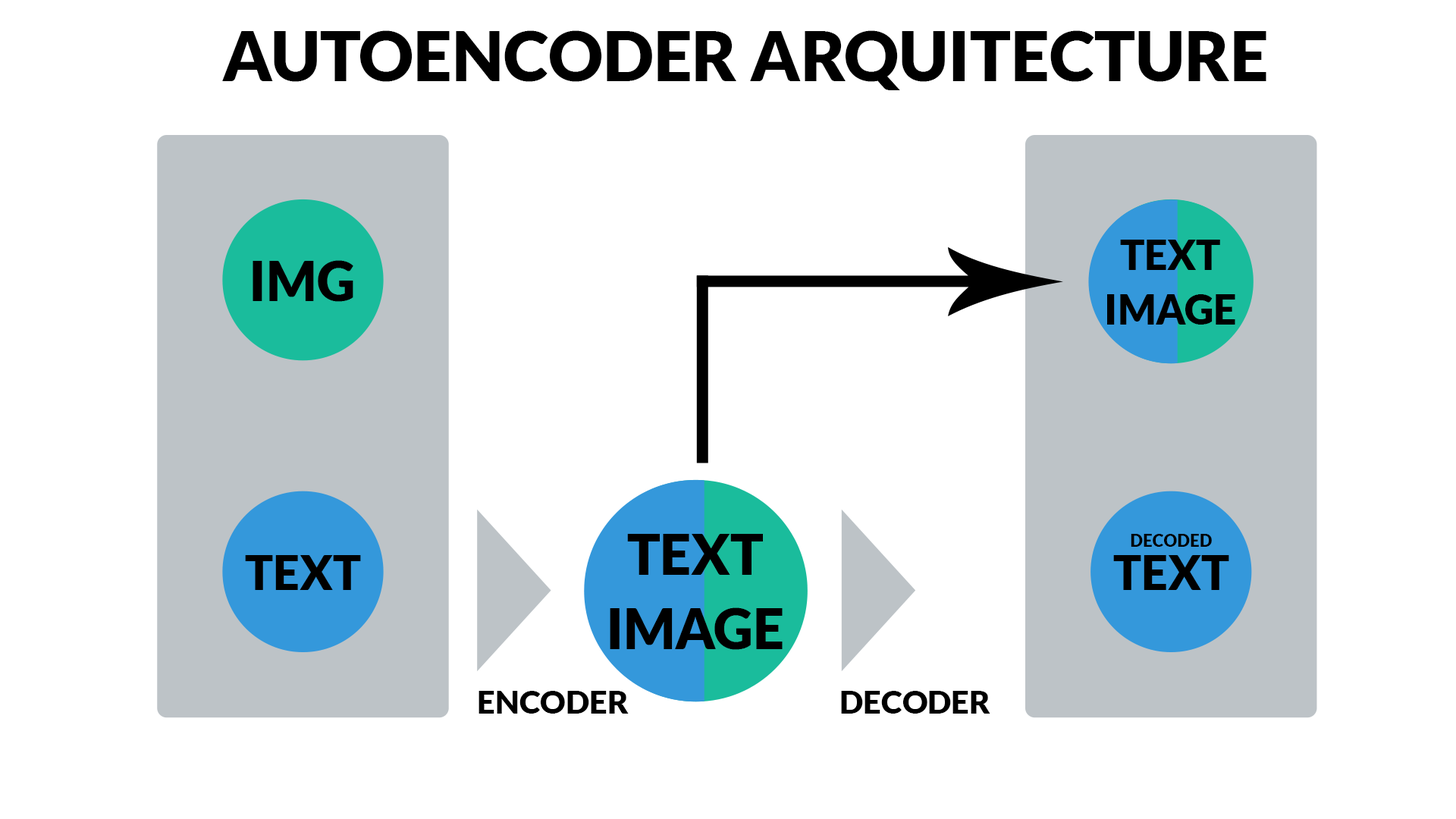
<style>
.page{position:relative;width:1456px;height:819px;background:#ffffff}
.page>*{position:absolute;margin:0}
.t1{font:68.2px "Lato-Black";color:#000000}
.t2{font:40.6px/63.1px "Lato-Black";color:#000000}
.t3{font:54.2px "Lato-Black";color:#000000}
.t4{font:55.1px/85.5px "Lato-Black";color:#000000}
.t5{font:17px "Lato-Black";color:#000000}
.t6{font:47.1px "Lato-Black";color:#000000}
.t7{font:31.9px "Lato-Black";color:#000000}
</style>
<div class="page">
<p class="t1" style="left:222px;top:30px;width:1044px;height:60px">AUTOENCODER ARQUITECTURE</p>
<p class="t2" style="left:1107px;top:240px;width:128px;height:85px;text-align:center">TEXT<br>IMAGE</p>
<p class="t3" style="left:253px;top:260px;width:100px;height:42px">IMG</p>
<p class="t4" style="left:610px;top:534px;width:173px;height:116px;text-align:center">TEXT<br>IMAGE</p>
<p class="t5" style="left:1131px;top:534px;width:81px;height:13px">DECODED</p>
<p class="t6" style="left:245px;top:555px;width:116px;height:35px">TEXT</p>
<p class="t6" style="left:1113px;top:555px;width:116px;height:35px">TEXT</p>
<p class="t7" style="left:479px;top:691px;width:150px;height:23px">ENCODER</p>
<p class="t7" style="left:841px;top:691px;width:149px;height:23px">DECODER</p>
</div>
